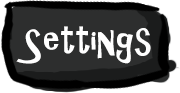
<style>
.page{position:relative;width:180px;height:93px;background:#2d2e2e}
.page>*{position:absolute;margin:0}
.t1{font:37.5px "ARCHRISTY";color:#ffffff}
</style>
<div class="page">
<p class="t1" style="left:16px;top:26px;width:135px;height:38px">Settings</p>
<p class="t1" style="left:16px;top:26px;width:135px;height:38px">Settings</p>
</div>
